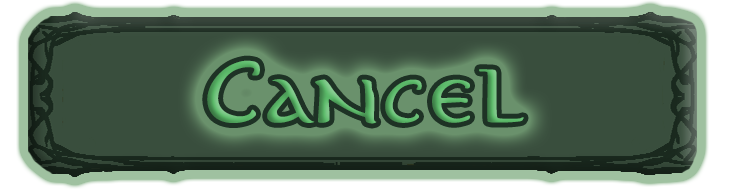
<style>
.page{position:relative;width:732px;height:195px;background:#394e3d}
.page>*{position:absolute;margin:0}
.t1{font:86.4px "MiddleEarth";color:#5bba69}
</style>
<div class="page">
<p class="t1" style="left:207px;top:60px;width:317px;height:64px">Cancel</p>
</div>
